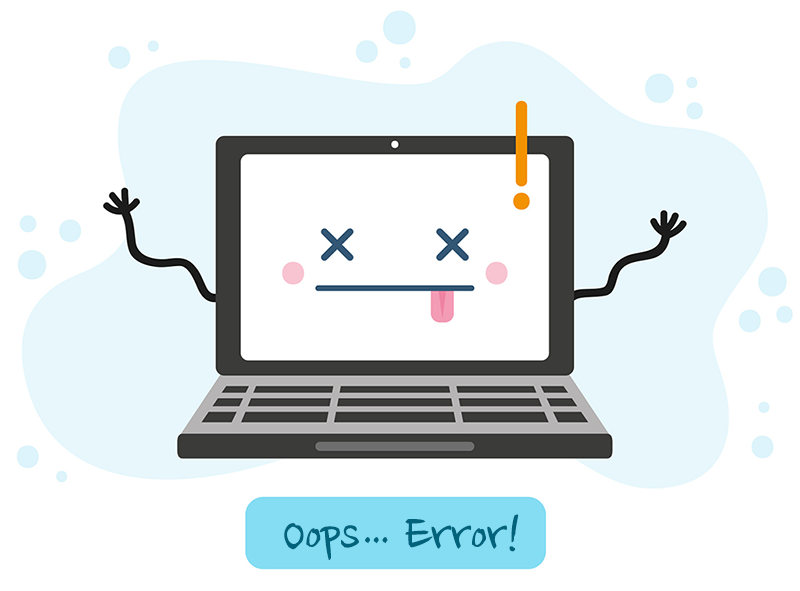
<style>
.page{position:relative;width:800px;height:591px;background:#ffffff}
.page>*{position:absolute;margin:0}
.t1{font:59.6px "NanumBrush";letter-spacing:-0.025em;color:#00627b}
.t2{font:49.7px "NanumBrush";letter-spacing:-0.025em;color:#00627b}
</style>
<div class="page">
<p class="t1" style="left:284px;top:514px;width:235px;height:47px">Oops   Error!</p>
<p class="t2" style="left:365px;top:537px;width:23px;height:7px">...</p>
</div>
